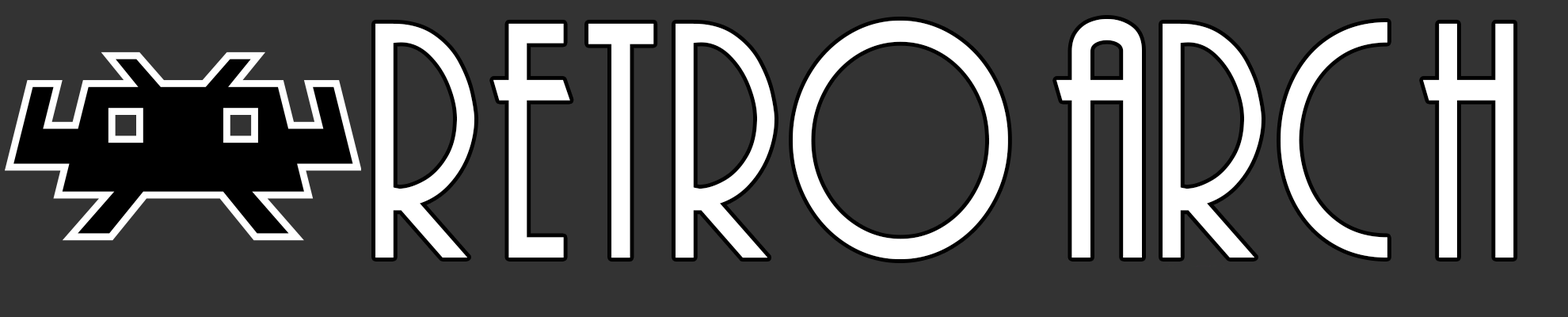
<style>
.page{position:relative;width:1568px;height:317px;background:#333333}
.page>*{position:absolute;margin:0}
.t1{font:311.2px "PlazaITC-Normal";color:#ffffff;scale:0.9 1}
</style>
<div class="page">
<p class="t1" style="left:375px;top:20px;width:633px;height:239px">RETRO</p>
<p class="t1" style="left:1056px;top:18px;width:458px;height:239px">ARCH</p>
</div>
